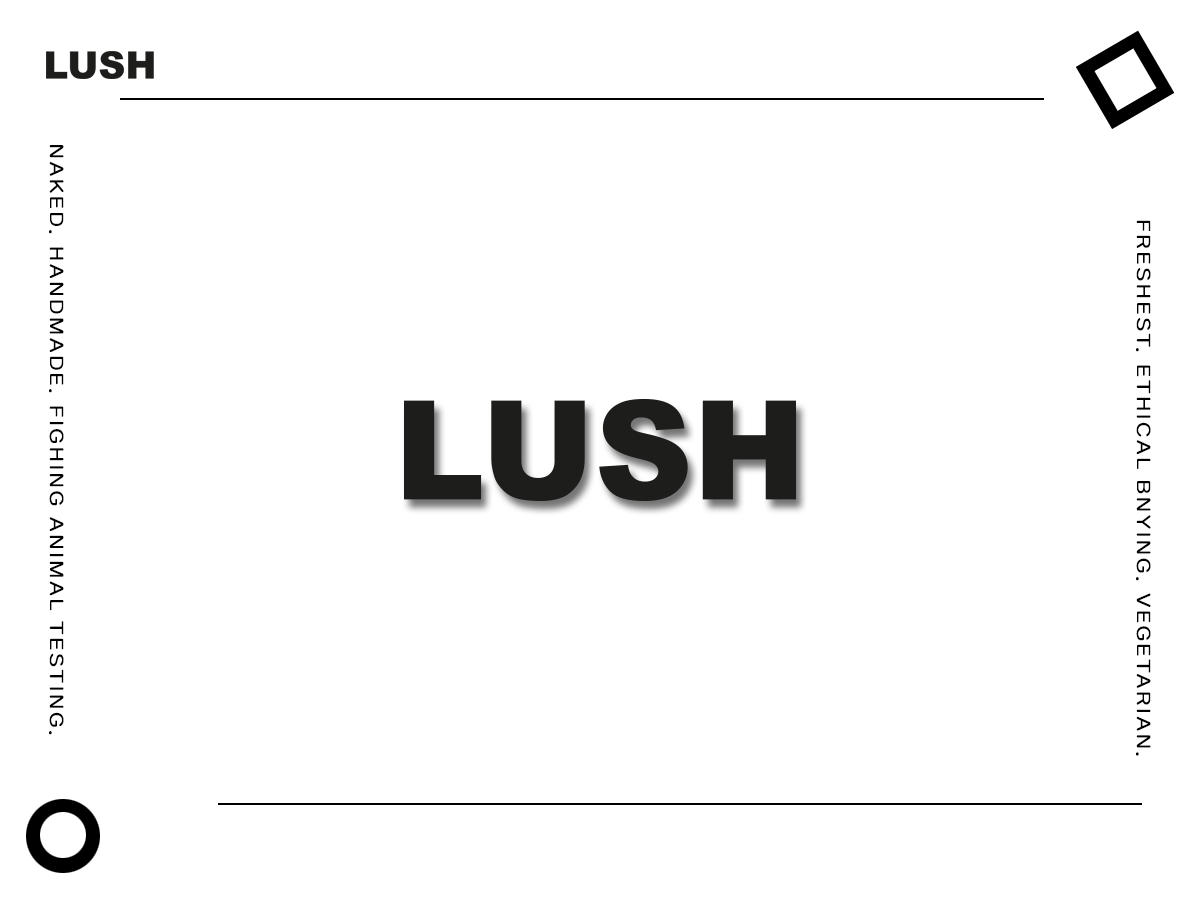
<style>
.page{position:relative;width:1200px;height:900px;background:#ffffff}
.page>*{position:absolute;margin:0}
.t1{font:20px "TmoneyRoundWind-Regular";letter-spacing:0.1em;color:#010101;font-weight:bold;scale:0.9 1}
</style>
<div class="page">
<p class="t1" style="left:49px;top:145px;width:15px;height:590px">NAKED. HANDMADE. FIGHING ANIMAL TESTING.</p>
<p class="t1" style="left:1136px;top:220px;width:15px;height:536px">FRESHEST. ETHICAL BNYING. VEGETARIAN.</p>
</div>
